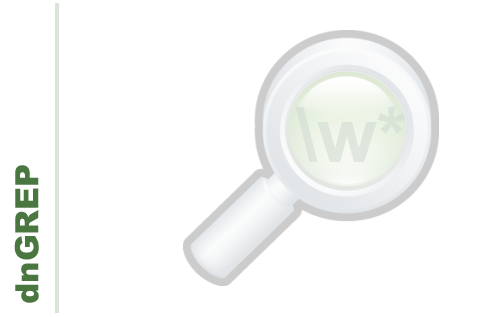
<style>
.page{position:relative;width:500px;height:317px;background:#ffffff}
.page>*{position:absolute;margin:0}
.t1{font:32px "Arial-Black";color:#4a7740}
</style>
<div class="page">
<p class="t1" style="left:14px;top:165px;width:25px;height:138px;rotate:-90deg">dnGREP</p>
</div>
